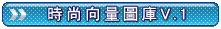
<style>
.page{position:relative;width:221px;height:29px}
.page>*{position:absolute;margin:0}
.t1{font:16px "MS-PGothic";letter-spacing:0.18em;color:#fdf9f9}
</style>
<div class="page">
<p class="t1" style="left:48px;top:6px;width:137px;height:15px">時尚向量圖庫V.1</p>
</div>
